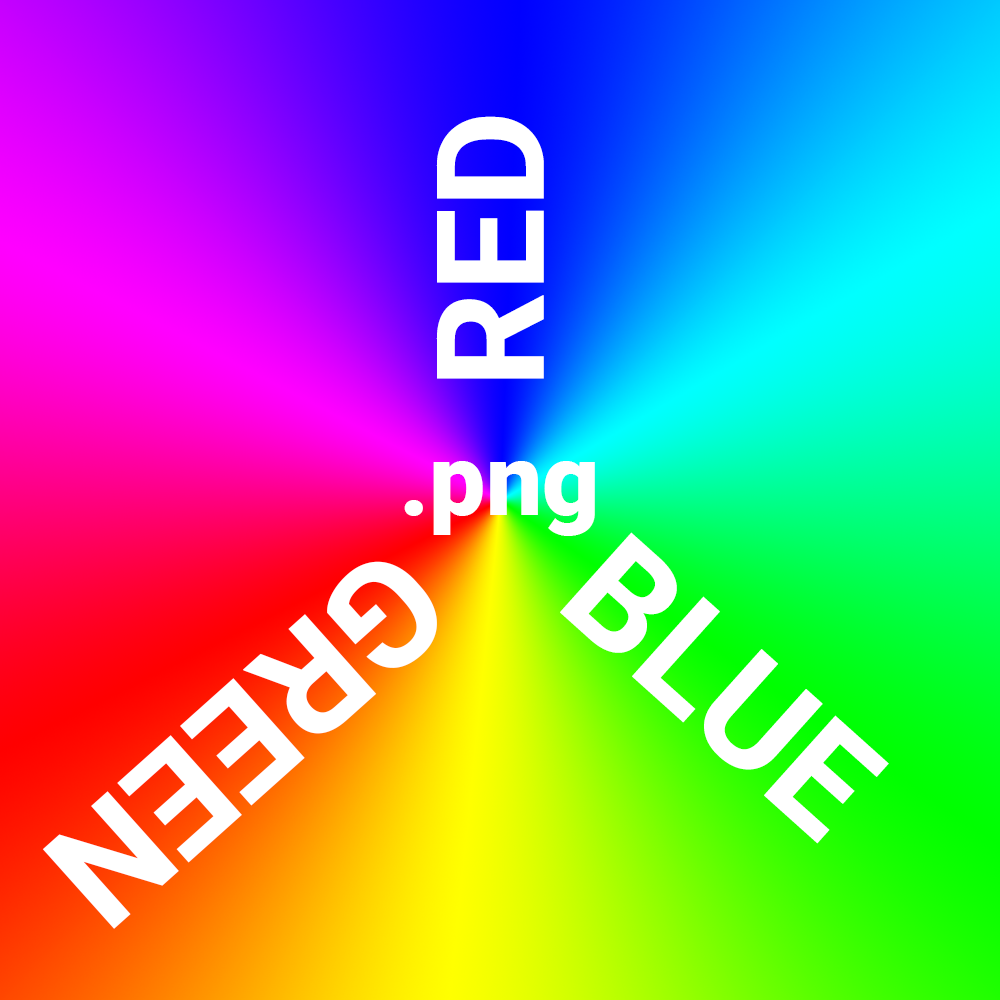
<style>
.page{position:relative;width:1000px;height:1000px}
.page>*{position:absolute;margin:0}
.t1{font:150px "Roboto-Bold";color:#ffffff}
.t2{font:100px "Roboto-Black";color:#ffffff}
</style>
<div class="page">
<p class="t1" style="left:436px;top:116px;width:108px;height:263px;rotate:-90deg">RED</p>
<p class="t2" style="left:404px;top:461px;width:191px;height:75px">.png</p>
<p class="t1" style="left:560px;top:532px;width:329px;height:312px;rotate:42deg">BLUE</p>
<p class="t1" style="left:42px;top:561px;width:395px;height:368px;rotate:138deg">GREEN</p>
</div>
